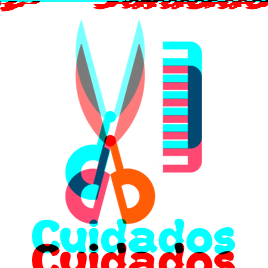
<style>
.page{position:relative;width:268px;height:268px;background:#ffffff}
.page>*{position:absolute;margin:0}
.t1{font:41.7px "Kush-Fat";color:#03ffff}
</style>
<div class="page">
<p class="t1" style="left:31px;top:216px;width:205px;height:37px">Cuidados</p>
</div>
